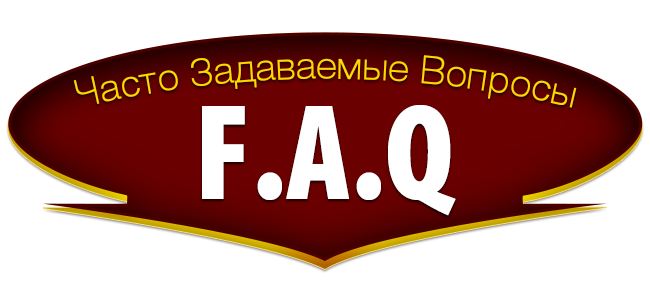
<style>
.page{position:relative;width:650px;height:300px;background:#ffffff}
.page>*{position:absolute;margin:0}
.t1{font:38px "Helvetica-4-Light";color:#ffd800}
.t2{font:138.2px "MyriadPro-BlackCond";color:#ffffff}
</style>
<div class="page">
<p class="t1" style="left:73px;top:55px;width:504px;height:53px">Часто Задаваемые Вопросы</p>
<p class="t2" style="left:202px;top:105px;width:254px;height:111px">F.A.Q</p>
</div>
